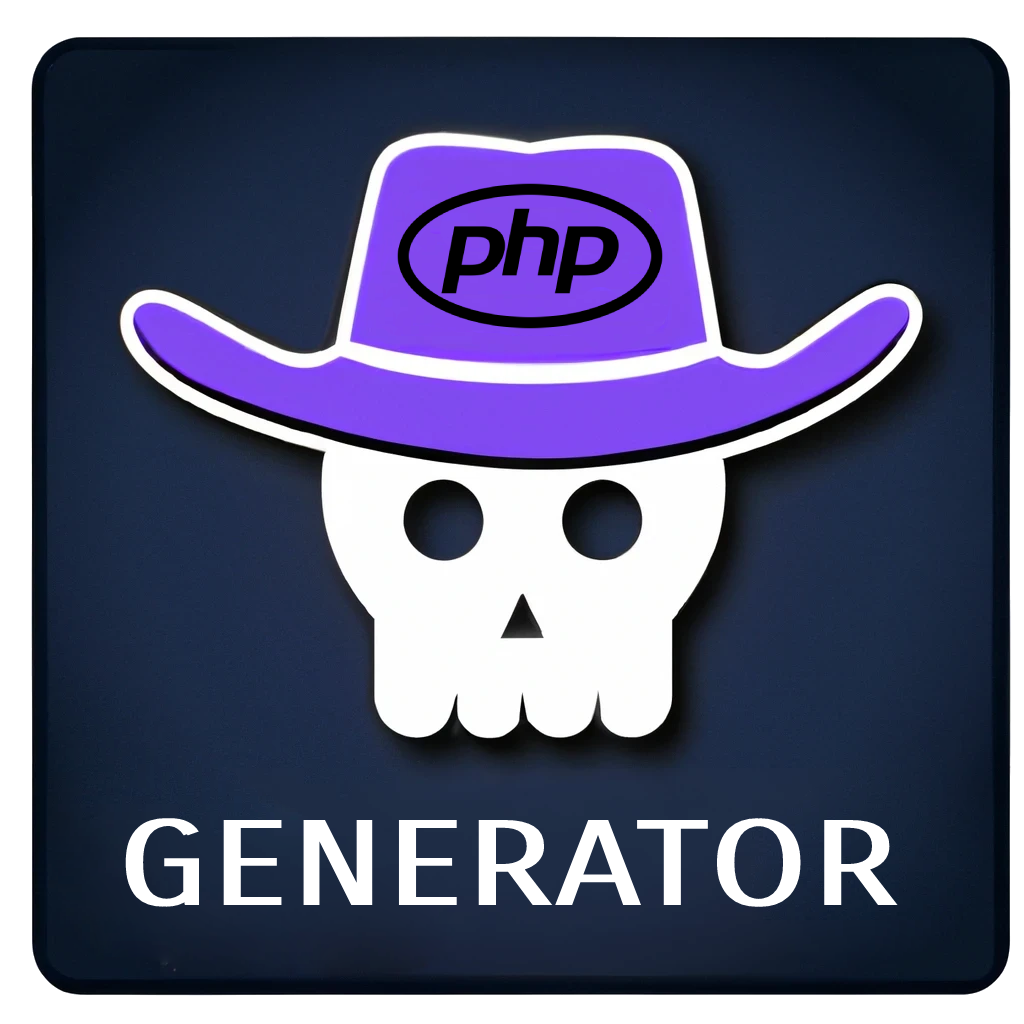
<style>
.page{position:relative;width:1024px;height:1024px}
.page>*{position:absolute;margin:0}
.t1{font:118px "CarroisGothic-Regular";color:#ffffff;font-weight:bold;scale:1.3 1}
</style>
<div class="page">
<p class="t1" style="left:125px;top:818px;width:773px;height:89px">GENERATOR</p>
</div>
